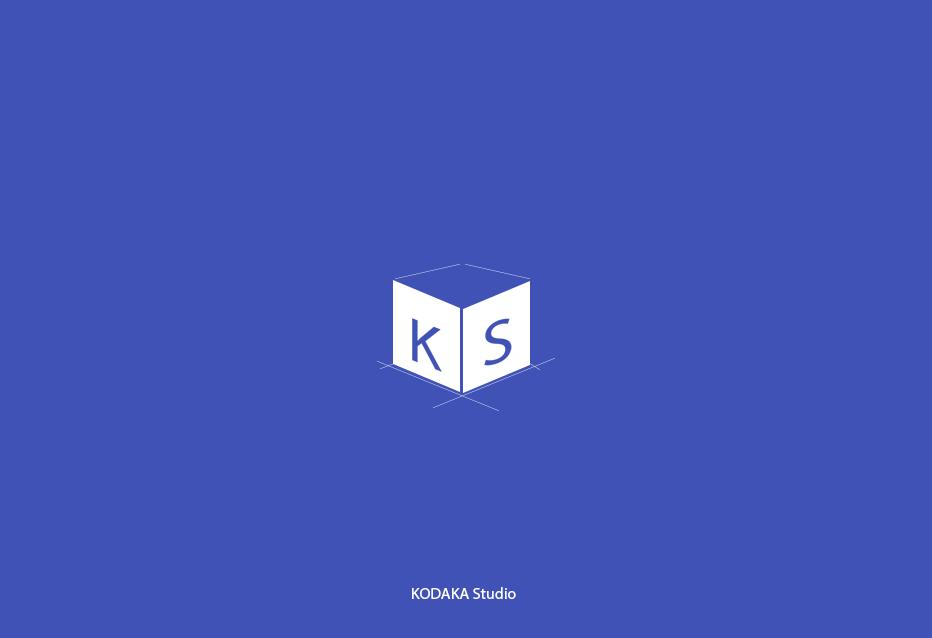
<style>
.page{position:relative;width:932px;height:638px;background:#4052b6}
.page>*{position:absolute;margin:0}
.t1{font:16px "MyriadPro-Regular";color:#ffffff}
</style>
<div class="page">
<p class="t1" style="left:412px;top:587px;width:104px;height:12px">KODAKA Studio</p>
</div>
